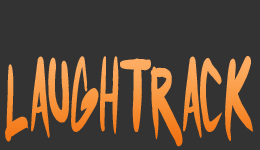
<style>
.page{position:relative;width:260px;height:150px;background:#333333}
.page>*{position:absolute;margin:0}
.t1{font:84.4px "Punkboy";scale:0.53 1}
</style>
<div class="page">
<p class="t1" style="left:5px;top:56px;width:248px;height:91px">LAUGHTRACK</p>
</div>
